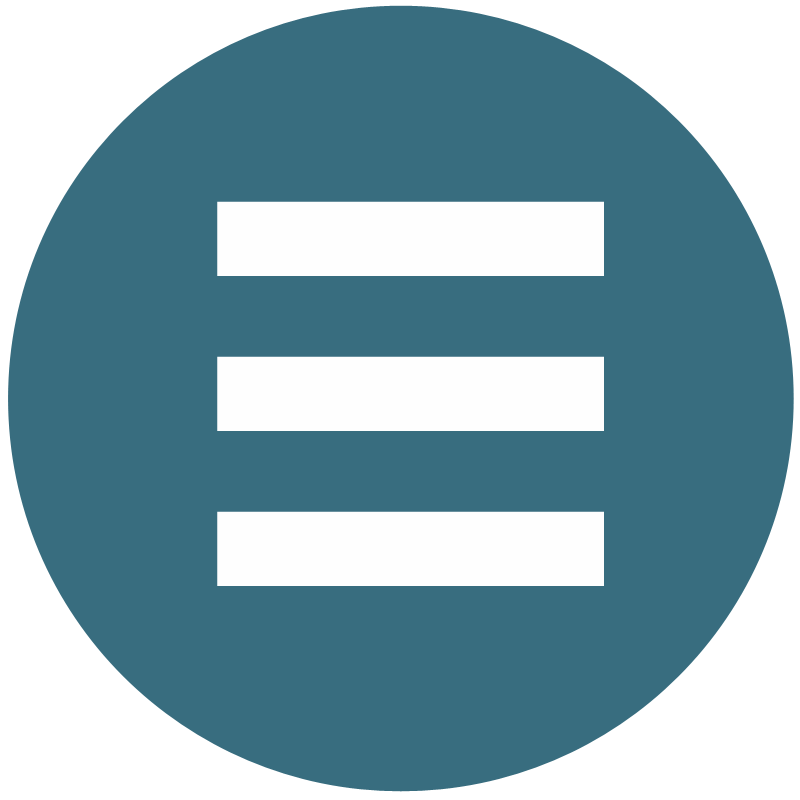
<style>
.page{position:relative;width:800px;height:800px;background:#386d7f}
.page>*{position:absolute;margin:0}
.t1{font:1429px "Dense-Regular";letter-spacing:-0.012em;color:#fefefe;scale:1.42 1}
</style>
<div class="page">
<p class="t1" style="left:217px;top:201px;width:387px;height:75px">-</p>
<p class="t1" style="left:217px;top:356px;width:387px;height:75px">-</p>
<p class="t1" style="left:217px;top:511px;width:387px;height:75px">-</p>
</div>
